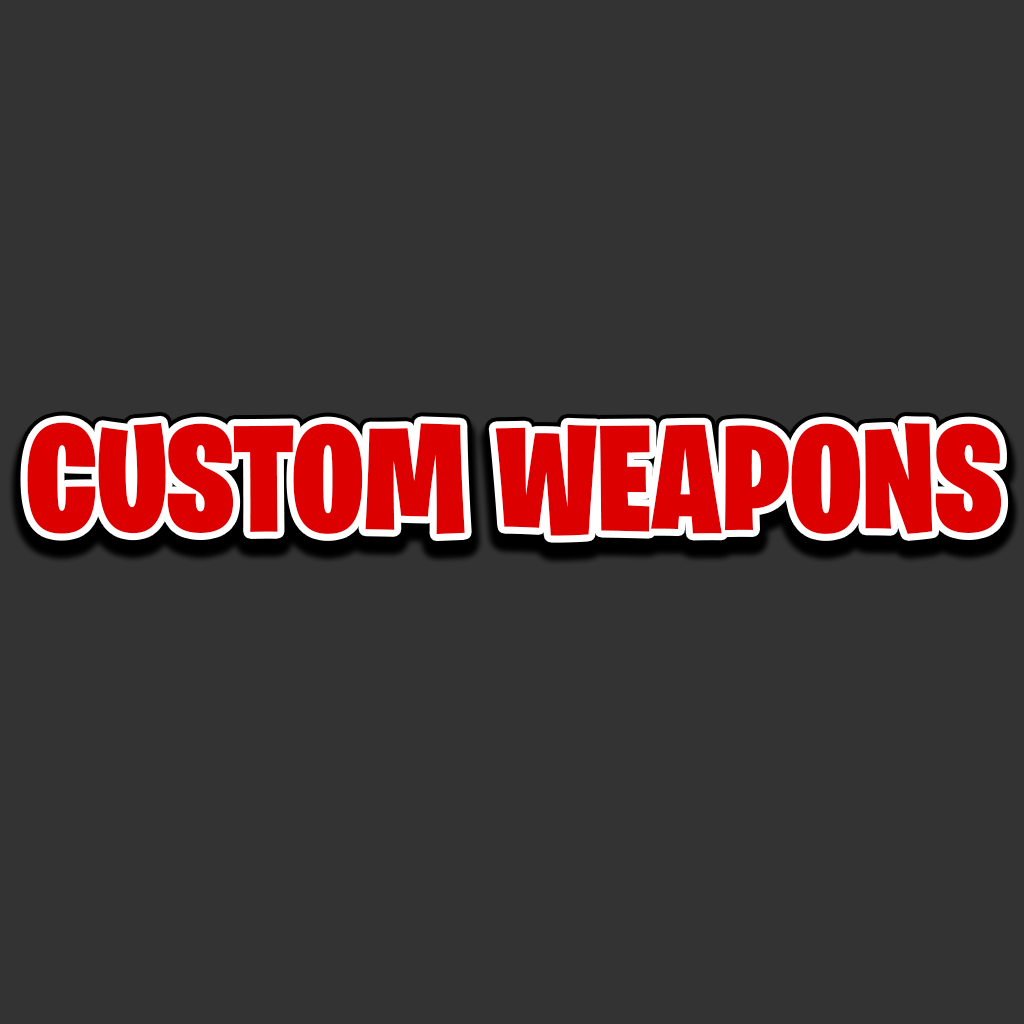
<style>
.page{position:relative;width:1024px;height:1024px;background:#333333}
.page>*{position:absolute;margin:0}
.t1{font:151.2px "BurbankBigCondensed-Black";color:#dd0000}
</style>
<div class="page">
<p class="t1" style="left:27px;top:422px;width:975px;height:114px">CUSTOM WEAPONS</p>
</div>
